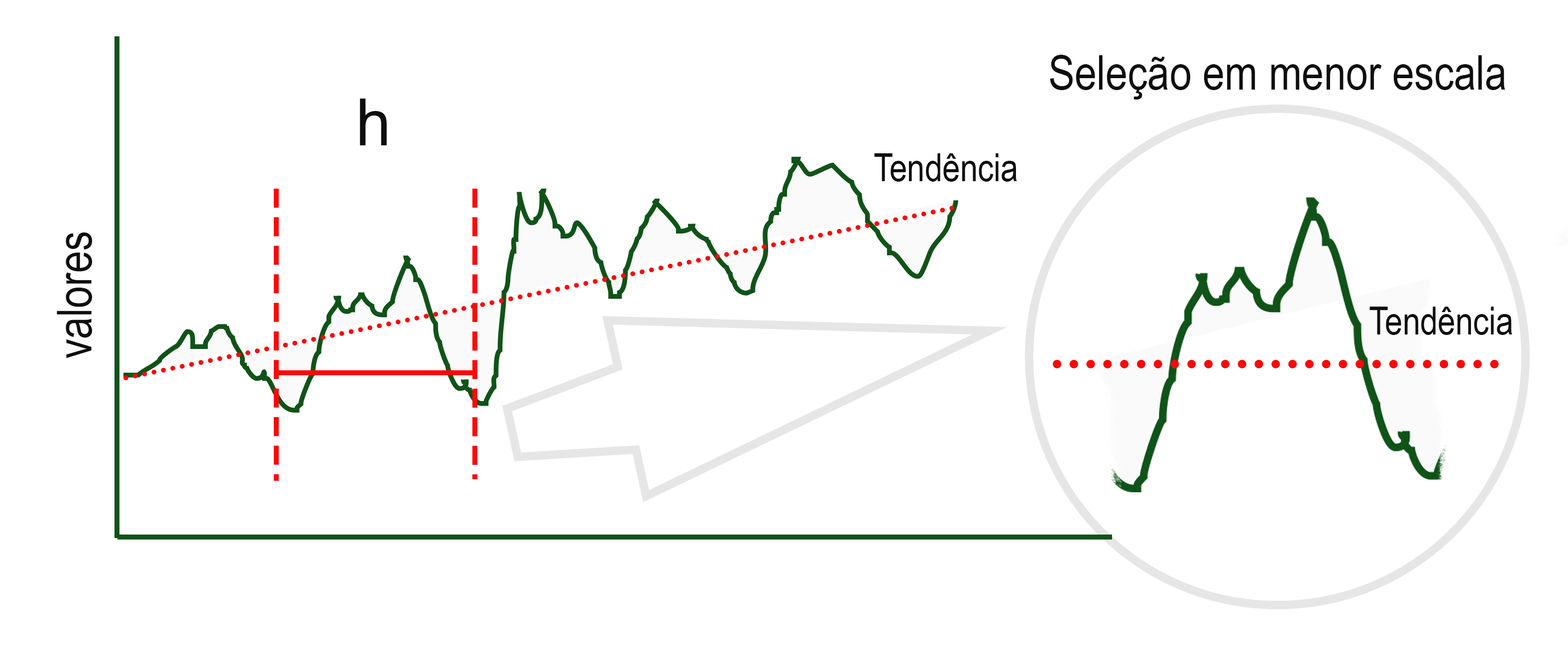
<style>
.page{position:relative;width:1568px;height:656px;background:#ffffff}
.page>*{position:absolute;margin:0}
.t1{font:83px "ArialNarrow";color:#0d0f0d}
.t2{font:111.6px "ArialNarrow";color:#0d0f0d;scale:1.19 1}
.t3{font:66.4px "ArialNarrow";color:#0d0f0d}
</style>
<div class="page">
<p class="t1" style="left:1050px;top:55px;width:455px;height:45px">Seleção em menor escala</p>
<p class="t2" style="left:360px;top:99px;width:27px;height:46px">h</p>
<p class="t3" style="left:874px;top:153px;width:143px;height:29px">Tendência</p>
<p class="t1" style="left:57px;top:232px;width:35px;height:126px;rotate:-90deg">valores</p>
<p class="t3" style="left:1369px;top:307px;width:143px;height:28px">Tendência</p>
</div>
